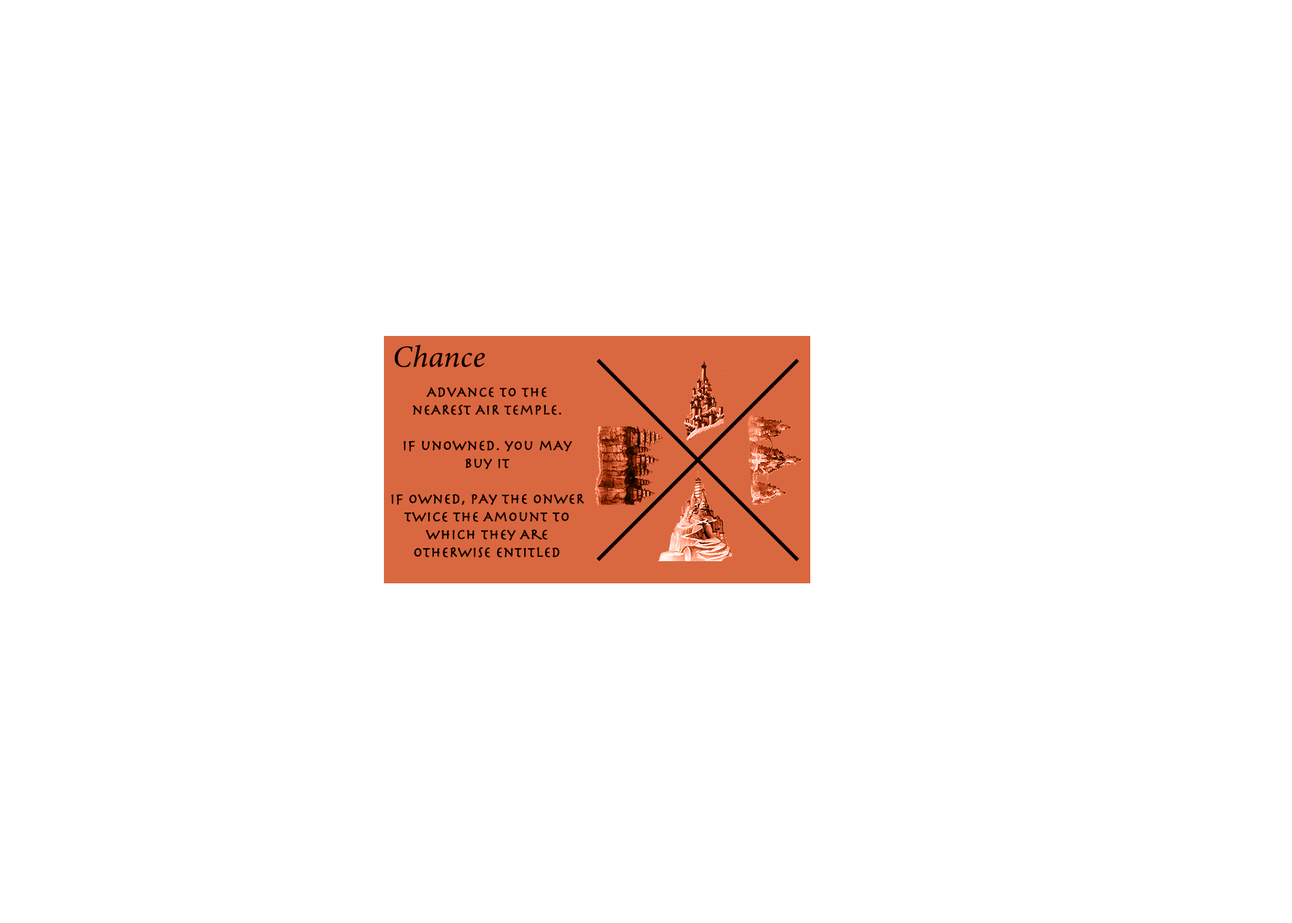
<style>
.page{position:relative;width:1292px;height:923px;background:#ffffff}
.page>*{position:absolute;margin:0}
.t1{font:30.8px "MinionConceptItalic-MediumItalic";color:#000000;font-weight:bold}
.t2{font:14.8px "Herculanum";color:#000000;font-weight:bold}
</style>
<div class="page">
<p class="t1" style="left:394px;top:345px;width:91px;height:22px">Chance</p>
<p class="t2" style="left:391px;top:387px;width:193px;height:170px;text-align:center">AdvAnce to the<br>neARest AiR temple.<br><br>if unowned. you mAy<br>buy it<br><br>if owned, pAy the onweR<br>twice the Amount to<br>which they Are<br>otheRwise entitled</p>
</div>
